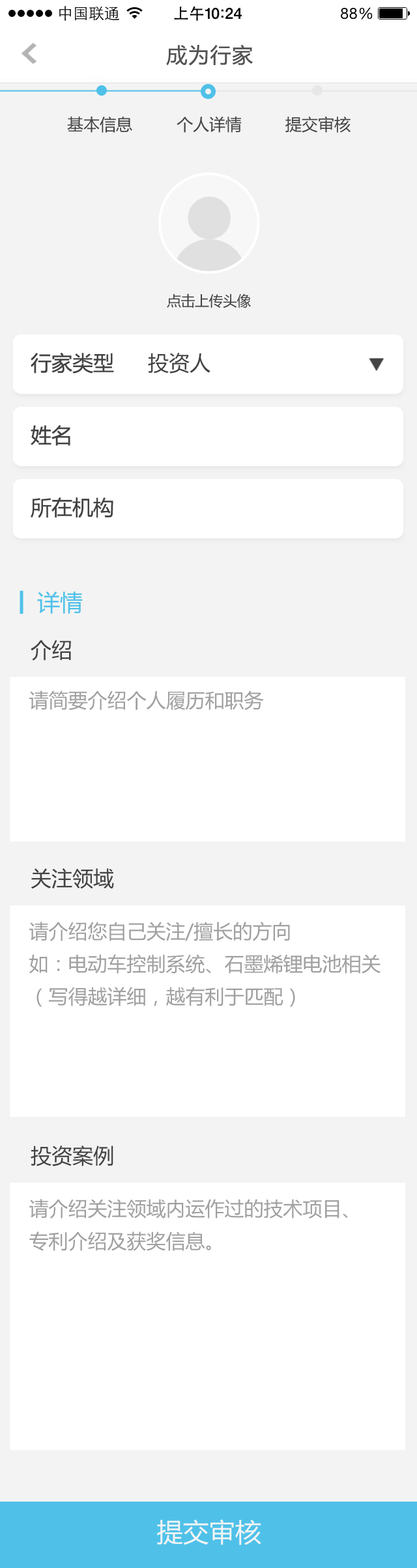
<style>
.page{position:relative;width:417px;height:1568px;background:#ffffff}
.page>*{position:absolute;margin:0}
.t1{font:20.8px "MicrosoftYaHei";letter-spacing:0.05em;color:#535353}
.t2{font:16.3px "MicrosoftYaHei";color:#434343}
.t3{font:14.3px "MicrosoftYaHei";letter-spacing:-0.025em;color:#434343}
.t4{font:20.8px "MicrosoftYaHei";color:#434343}
.t5{font:22.8px "MicrosoftYaHei";color:#4fc1e9}
.t6{font:19.5px "MicrosoftYaHei";color:#a0a0a0}
.t7{font:19.5px/32.5px "MicrosoftYaHei";color:#a0a0a0}
.t8{font:26px "MicrosoftYaHei";color:#f4f4f4}
</style>
<div class="page">
<p class="t1" style="left:166px;top:44px;width:87px;height:22px">成为行家</p>
<p class="t2" style="left:67px;top:117px;width:65px;height:16px">基本信息</p>
<p class="t2" style="left:176px;top:117px;width:65px;height:16px">个人详情</p>
<p class="t2" style="left:285px;top:116px;width:65px;height:17px">提交审核</p>
<p class="t3" style="left:167px;top:294px;width:84px;height:14px">点击上传头像</p>
<p class="t4" style="left:31px;top:352px;width:83px;height:22px">行家类型</p>
<p class="t4" style="left:148px;top:353px;width:62px;height:21px">投资人</p>
<p class="t4" style="left:31px;top:425px;width:39px;height:21px">姓名</p>
<p class="t4" style="left:31px;top:497px;width:82px;height:21px">所在机构</p>
<p class="t5" style="left:37px;top:591px;width:46px;height:23px">详情</p>
<p class="t4" style="left:31px;top:640px;width:40px;height:21px">介绍</p>
<p class="t6" style="left:29px;top:691px;width:235px;height:19px">请简要介绍个人履历和职务</p>
<p class="t4" style="left:31px;top:868px;width:83px;height:21px">关注领域</p>
<p class="t7" style="left:29px;top:922px;width:351px;height:85px">请介绍您自己关注/擅长的方向<br>如：电动车控制系统、石墨烯锂电池相关<br>（写得越详细，越有利于匹配）</p>
<p class="t4" style="left:31px;top:1146px;width:82px;height:20px">投资案例</p>
<p class="t7" style="left:29px;top:1199px;width:319px;height:52px">请介绍关注领域内运作过的技术项目、<br>专利介绍及获奖信息。</p>
<p class="t8" style="left:157px;top:1519px;width:104px;height:26px">提交审核</p>
</div>
